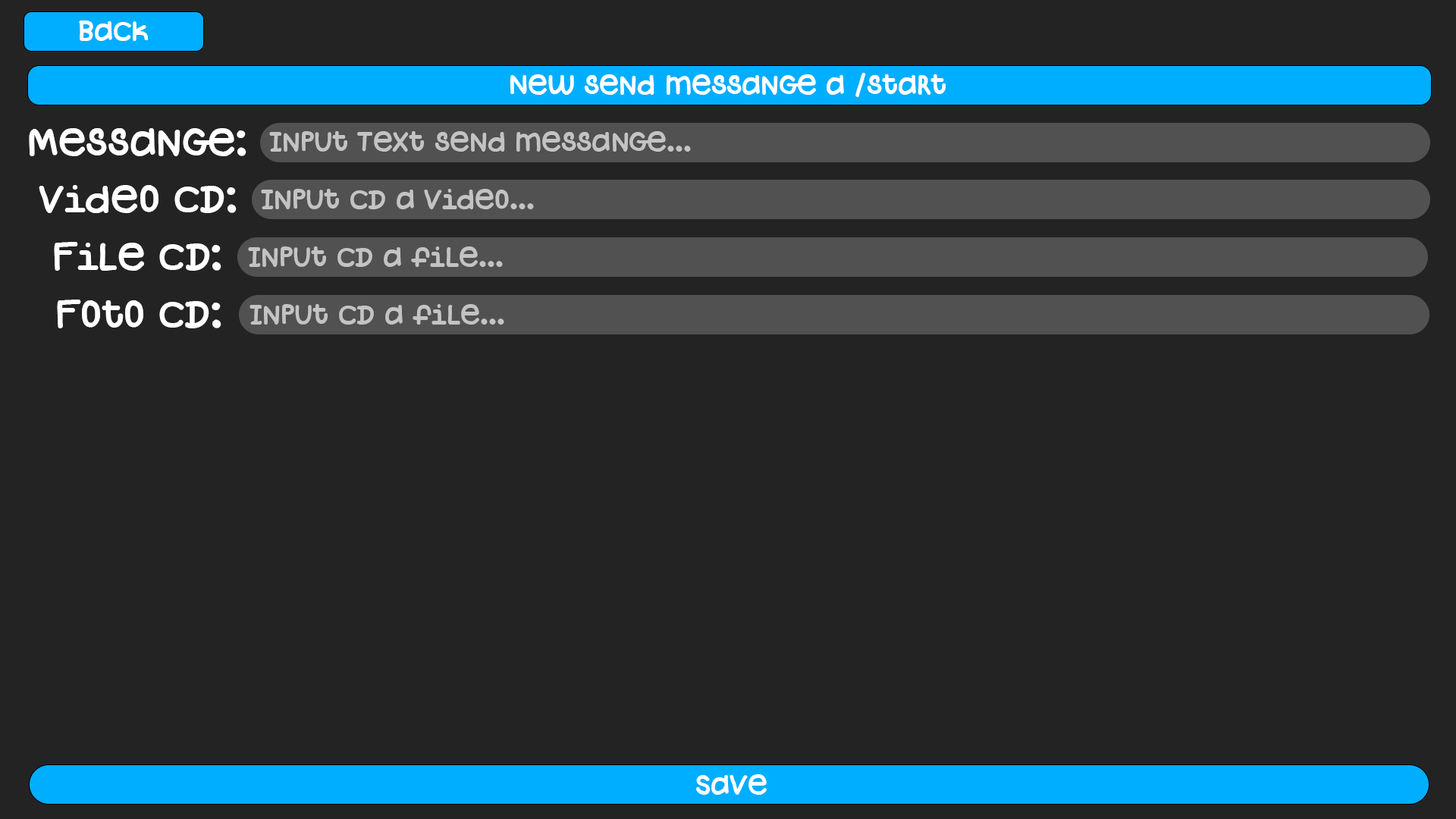
<style>
.page{position:relative;width:1456px;height:819px;background:#232323}
.page>*{position:absolute;margin:0}
.t1{font:27.8px "MVcrookerRegular";color:#ffffff}
.t2{font:39.4px "MVcrookerRegular";color:#ffffff}
.t3{font:27.8px "MVcrookerRegular";color:#c3c3c3}
</style>
<div class="page">
<p class="t1" style="left:79px;top:20px;width:70px;height:21px">Back</p>
<p class="t1" style="left:510px;top:73px;width:436px;height:24px">New send messange a /start</p>
<p class="t2" style="left:29px;top:128px;width:217px;height:28px">Messange:</p>
<p class="t3" style="left:269px;top:131px;width:422px;height:21px">Input Text send messange...</p>
<p class="t2" style="left:39px;top:185px;width:198px;height:28px">Video CD:</p>
<p class="t3" style="left:261px;top:189px;width:273px;height:20px">Input CD a Video...</p>
<p class="t2" style="left:54px;top:242px;width:167px;height:29px">File CD:</p>
<p class="t3" style="left:248px;top:246px;width:255px;height:21px">Input CD a file...</p>
<p class="t2" style="left:57px;top:300px;width:164px;height:28px">Foto CD:</p>
<p class="t3" style="left:249px;top:304px;width:255px;height:21px">Input CD a file...</p>
<p class="t1" style="left:696px;top:774px;width:71px;height:21px">Save</p>
</div>
